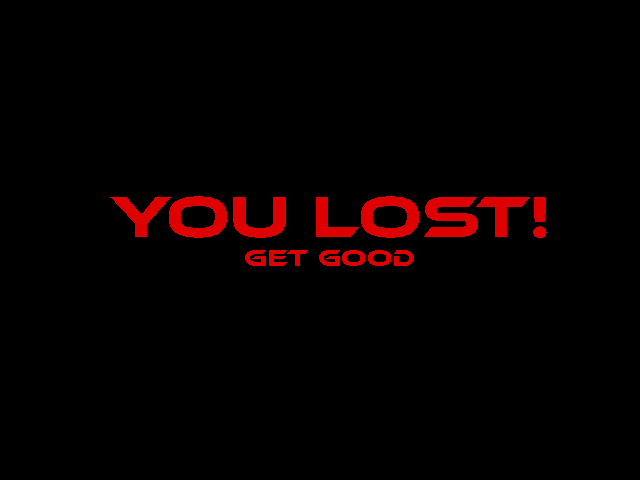
<style>
.page{position:relative;width:640px;height:480px;background:#000000}
.page>*{position:absolute;margin:0}
.t1{font:60px "EthnocentricRg-Regular";color:#de0000}
.t2{font:24px "EthnocentricRg-Regular";color:#de0000}
</style>
<div class="page">
<p class="t1" style="left:110px;top:196px;width:437px;height:70px;text-align:center">you lost!<br><span class="t2">get good</span></p>
</div>
